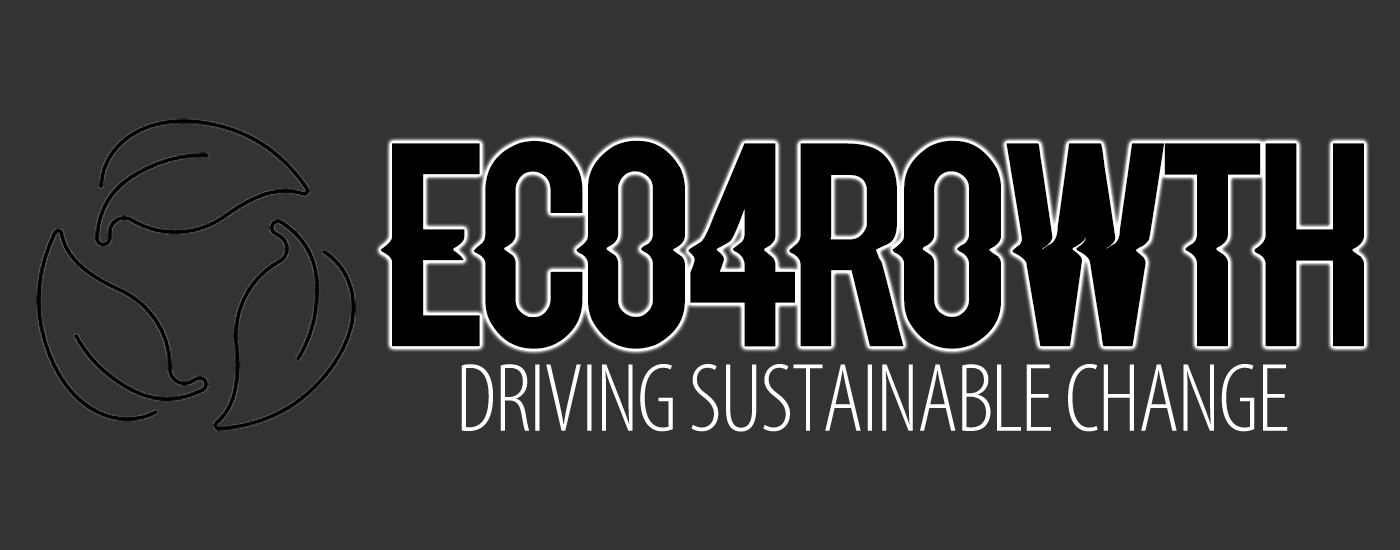
<style>
.page{position:relative;width:1400px;height:550px;background:#333333}
.page>*{position:absolute;margin:0}
.t1{font:196.5px "Blacklisted";letter-spacing:-0.02em;color:#000000;text-transform:uppercase}
.t2{font:98.2px "MyriadVariableConcept-Roman";letter-spacing:-0.02em;color:#ffffff;text-transform:uppercase}
</style>
<div class="page">
<p class="t1" style="left:381px;top:140px;width:983px;height:209px">ECO4ROWTH</p>
<p class="t2" style="left:461px;top:364px;width:827px;height:68px">DRIVING SUSTAINABLE CHANGE</p>
</div>
